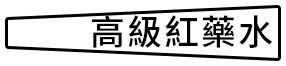
<style>
.page{position:relative;width:286px;height:66px;background:#ffffff}
.page>*{position:absolute;margin:0}
.t1{font:35px "NotoSansCJKtc-Medium";letter-spacing:0.06em;color:#000000}
</style>
<div class="page">
<p class="t1" style="left:92px;top:15px;width:181px;height:33px">高級紅藥水</p>
</div>
